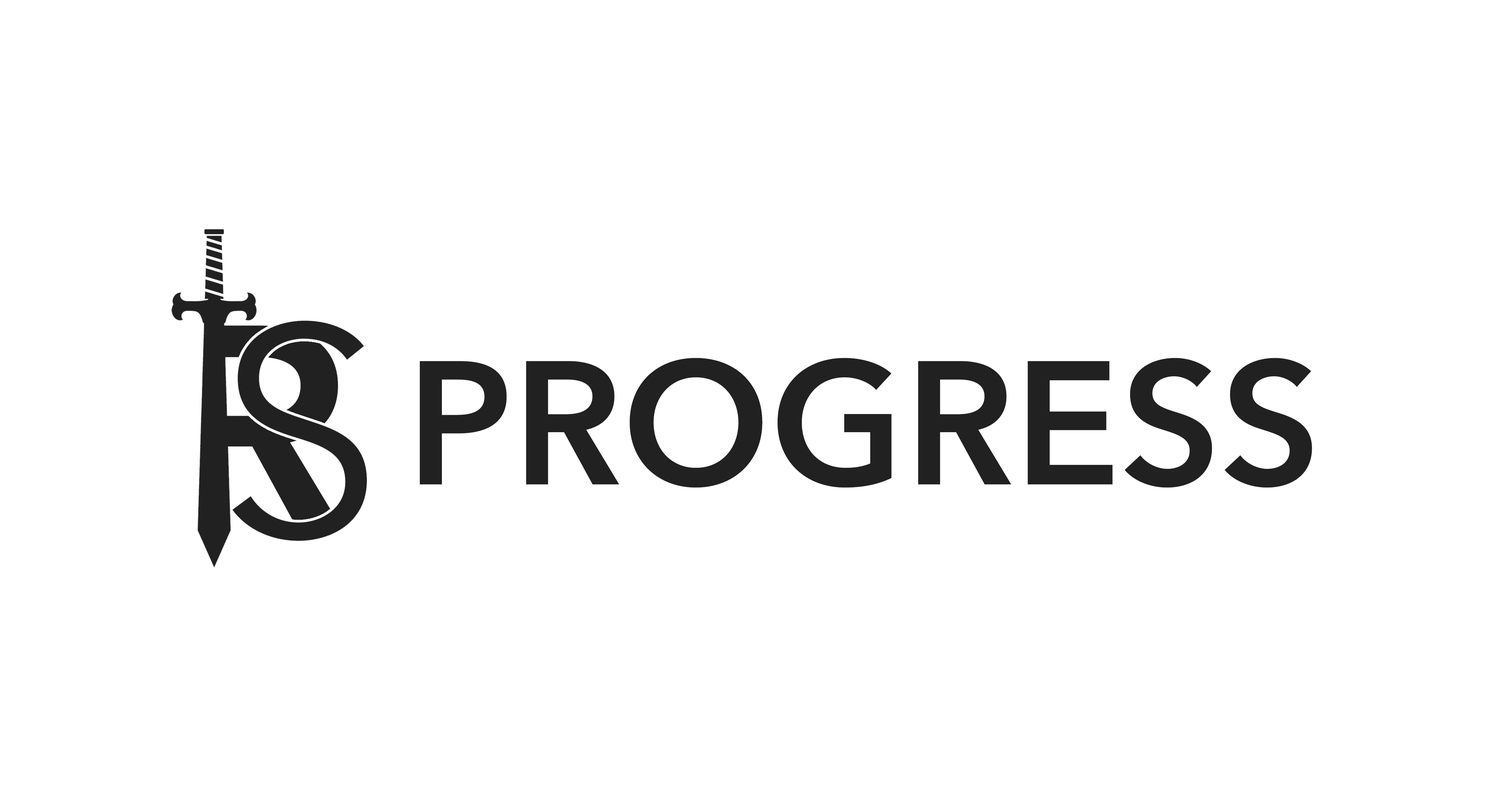
<style>
.page{position:relative;width:1488px;height:801px;background:#ffffff}
.page>*{position:absolute;margin:0}
.t1{font:174.2px "AvenirNextLTPro-Demi";color:#212121}
</style>
<div class="page">
<p class="t1" style="left:420px;top:358px;width:892px;height:130px">PROGRESS</p>
</div>
